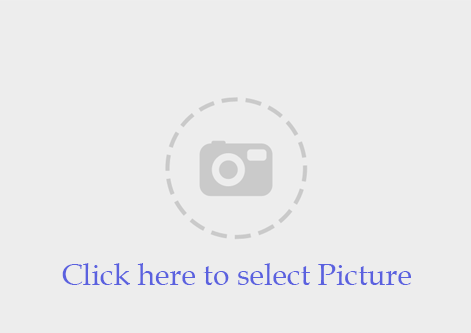
<style>
.page{position:relative;width:471px;height:333px;background:#ededed}
.page>*{position:absolute;margin:0}
.t1{font:30px "BookAntiqua";color:#5b61df}
</style>
<div class="page">
<p class="t1" style="left:62px;top:263px;width:349px;height:22px">Click here to select Picture</p>
</div>
